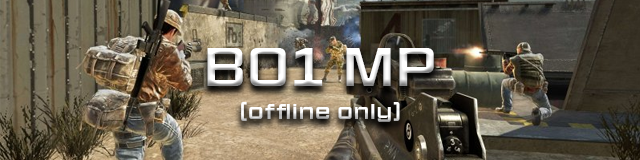
<style>
.page{position:relative;width:640px;height:160px}
.page>*{position:absolute;margin:0}
.t1{font:50px "HitmarkerNormal-Regular";letter-spacing:0.12em;color:#ffffff}
.t2{font:20px "HitmarkerNormal-Regular";letter-spacing:0.12em}
</style>
<div class="page">
<p class="t1" style="left:207px;top:48px;width:227px;height:38px">BO1 MP</p>
<p class="t2" style="left:241px;top:102px;width:159px;height:20px">(offline only)</p>
</div>
